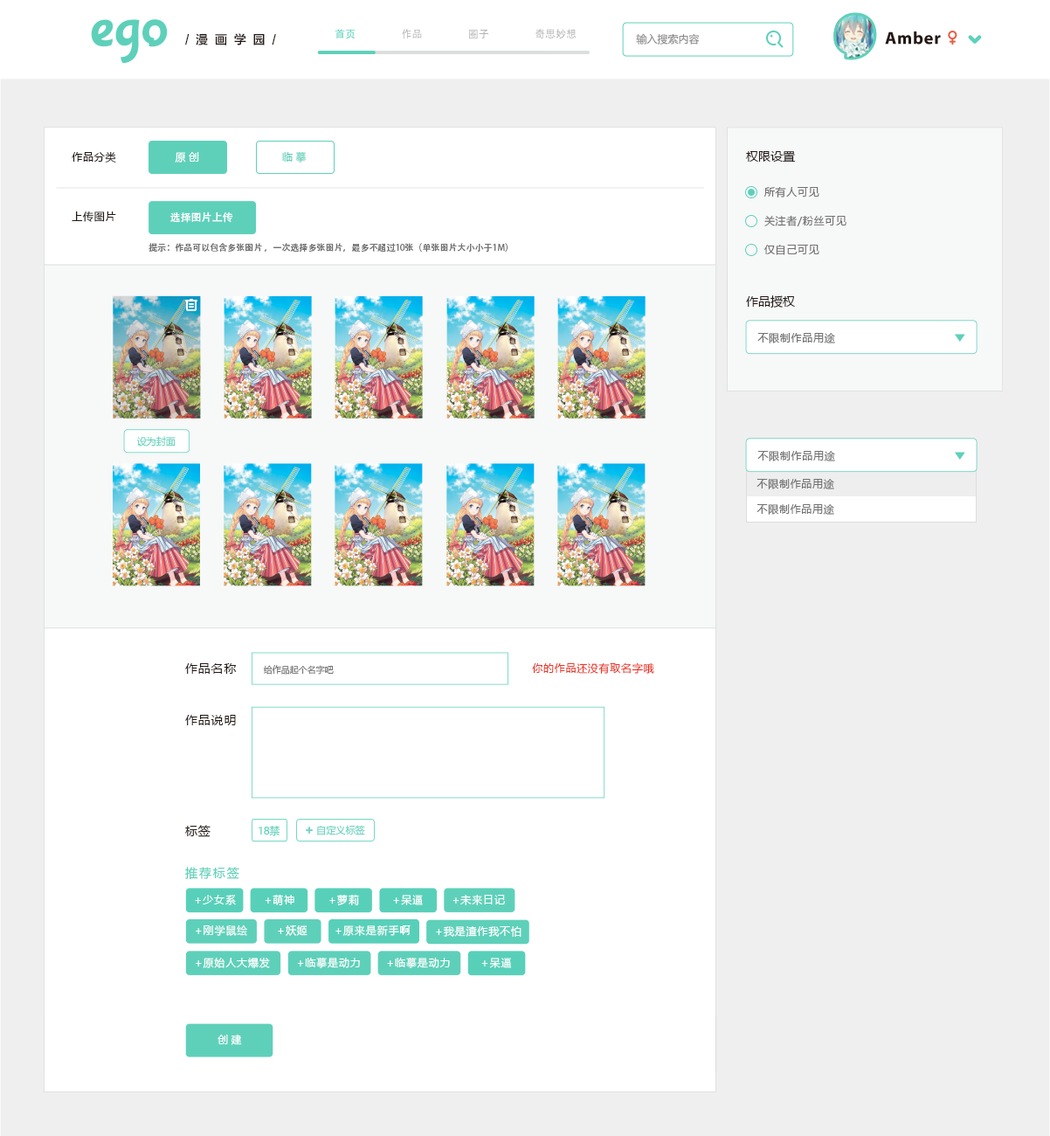
<style>
.page{position:relative;width:1050px;height:1136px;background:#ffffff}
.page>*{position:absolute;margin:0}
.t1{font:12.2px "FZLTZHK--GBK1-0";letter-spacing:0.56em;color:#231815}
.t2{font:10.5px "MicrosoftYaHei";color:#898989}
.t3{font:10.5px "MicrosoftYaHei";letter-spacing:0.06em;color:#231815}
.t4{font:10.5px "MicrosoftYaHei";color:#ffffff}
.t5{font:10.5px "MicrosoftYaHei";color:#5ed0ba}
.t6{font:12.2px "MicrosoftYaHei";color:#231815}
.t7{font:10.5px "MicrosoftYaHei";letter-spacing:0.06em;color:#727171}
.t8{font:10.5px "AdobeHeitiStd-Regular";color:#ffffff}
.t9{font:8.7px "AdobeHeitiStd-Regular";color:#727171}
.t10{font:9.9px "MicrosoftYaHei";letter-spacing:-0.02em;color:#58d0b9}
.t11{font:12.2px "MicrosoftYaHei";letter-spacing:0.06em;color:#231815}
.t12{font:8.7px "MicrosoftYaHei";color:#727171}
.t13{font:10.5px "MicrosoftYaHei";letter-spacing:0.06em;color:#e83828}
.t14{font:10.5px "MicrosoftYaHei";letter-spacing:-0.02em;color:#58d0b9}
.t15{font:12.2px "MicrosoftYaHei";letter-spacing:0.14em;color:#58d0b9}
.t16{font:10.5px "MicrosoftYaHei";letter-spacing:0.08em;color:#ffffff}
.t17{font:10.4px "MicrosoftYaHei";letter-spacing:0.08em;color:#ffffff}
</style>
<div class="page">
<p class="t1" style="left:185px;top:33px;width:91px;height:12px">/漫画学园/</p>
<p class="t2" style="left:636px;top:33px;width:64px;height:12px">输入搜索内容</p>
<p class="t3" style="left:72px;top:151px;width:44px;height:11px">作品分类</p>
<p class="t4" style="left:175px;top:152px;width:24px;height:10px">原 创</p>
<p class="t5" style="left:282px;top:151px;width:25px;height:11px">临 摹</p>
<p class="t6" style="left:746px;top:151px;width:50px;height:11px">权限设置</p>
<p class="t7" style="left:764px;top:186px;width:55px;height:11px">所有人可见</p>
<p class="t3" style="left:72px;top:211px;width:44px;height:11px">上传图片</p>
<p class="t8" style="left:170px;top:211px;width:63px;height:12px">选择图片上传</p>
<p class="t7" style="left:764px;top:215px;width:82px;height:11px">关注者/粉丝可见</p>
<p class="t9" style="left:149px;top:243px;width:359px;height:9px">提示：作品可以包含多张图片 ，一次选择多张图片，最多不超过10张（单张图片大小小于1M）</p>
<p class="t7" style="left:764px;top:244px;width:55px;height:11px">仅自己可见</p>
<p class="t6" style="left:746px;top:295px;width:49px;height:13px">作品授权</p>
<p class="t7" style="left:757px;top:333px;width:78px;height:10px">不限制作品用途</p>
<p class="t10" style="left:136px;top:436px;width:40px;height:10px">设为封面</p>
<p class="t7" style="left:757px;top:451px;width:78px;height:10px">不限制作品用途</p>
<p class="t7" style="left:757px;top:479px;width:77px;height:10px">不限制作品用途</p>
<p class="t7" style="left:757px;top:504px;width:77px;height:11px">不限制作品用途</p>
<p class="t11" style="left:185px;top:663px;width:52px;height:11px">作品名称</p>
<p class="t12" style="left:263px;top:665px;width:71px;height:9px">给作品起个名字吧</p>
<p class="t13" style="left:532px;top:662px;width:122px;height:12px">你的作品还没有取名字哦</p>
<p class="t11" style="left:185px;top:715px;width:51px;height:10px">作品说明</p>
<p class="t11" style="left:185px;top:825px;width:26px;height:12px">标签</p>
<p class="t14" style="left:259px;top:825px;width:21px;height:11px">18禁</p>
<p class="t10" style="left:317px;top:825px;width:48px;height:10px">自定义标签</p>
<p class="t15" style="left:185px;top:867px;width:54px;height:13px">推荐标签</p>
<p class="t16" style="left:265px;top:894px;width:29px;height:11px">+萌神</p>
<p class="t16" style="left:329px;top:894px;width:30px;height:11px">+萝莉</p>
<p class="t17" style="left:453px;top:894px;width:52px;height:11px">+未来日记</p>
<p class="t16" style="left:195px;top:895px;width:41px;height:10px">+少女系</p>
<p class="t16" style="left:393px;top:895px;width:30px;height:10px">+呆逼</p>
<p class="t16" style="left:196px;top:924px;width:51px;height:12px"><span class="t17">+</span>刚学鼠绘</p>
<p class="t17" style="left:278px;top:925px;width:29px;height:11px">+妖姬</p>
<p class="t16" style="left:335px;top:924px;width:76px;height:12px">+原来是新手啊</p>
<p class="t17" style="left:436px;top:925px;width:86px;height:11px">+我是渣作我不怕</p>
<p class="t17" style="left:196px;top:957px;width:74px;height:11px">+原始人大爆发</p>
<p class="t17" style="left:297px;top:957px;width:63px;height:11px">+临摹是动力</p>
<p class="t17" style="left:387px;top:957px;width:63px;height:11px">+临摹是动力</p>
<p class="t16" style="left:481px;top:957px;width:31px;height:11px">+呆逼</p>
<p class="t4" style="left:218px;top:1033px;width:24px;height:12px">创 建</p>
</div>
